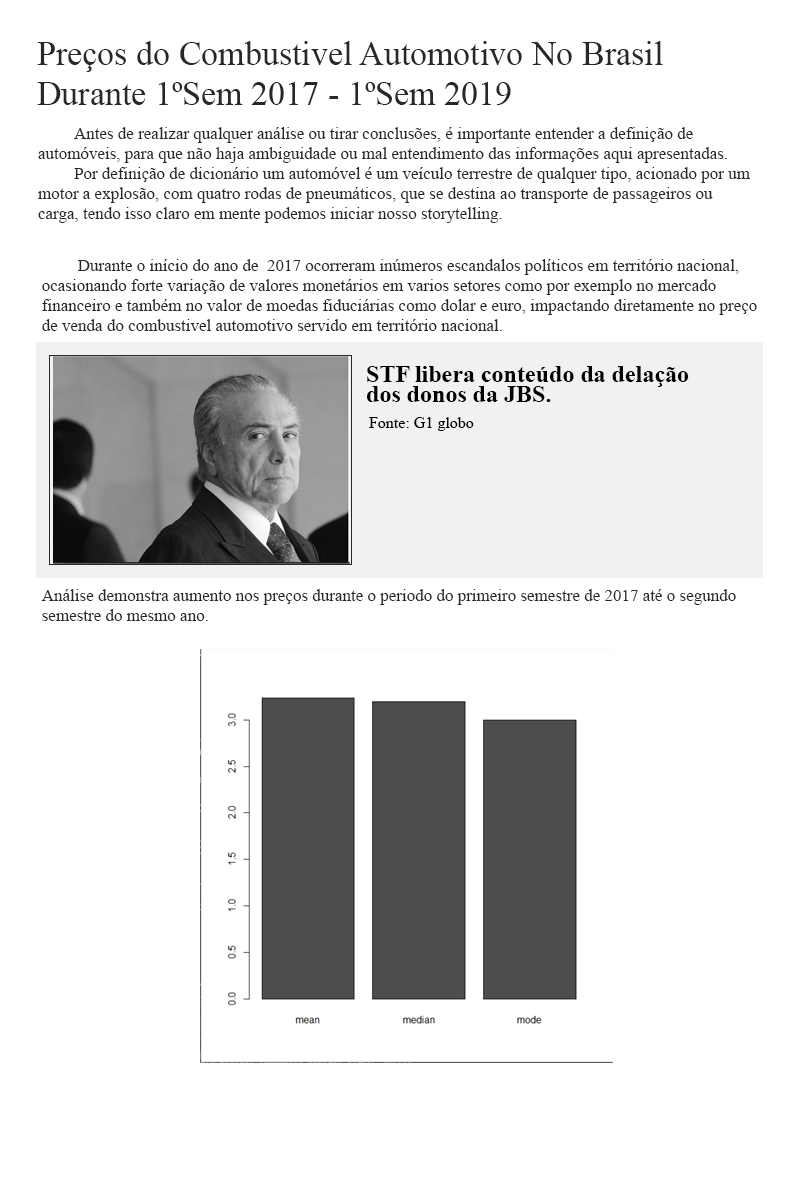
<style>
.page{position:relative;width:800px;height:1200px;background:#ffffff}
.page>*{position:absolute;margin:0}
.t1{font:34px/40px "TimesNewRomanPSMT";color:#282828}
.t2{font:17px/20px "TimesNewRomanPSMT";color:#282828}
.t3{font:24px/20px "TimesNewRomanPS-BoldMT";color:#000000}
.t4{font:16px "TimesNewRomanPSMT";color:#000000}
</style>
<div class="page">
<p class="t1" style="left:37px;top:41px;width:626px;height:64px">Preços do Combustivel Automotivo No Brasil<br>Durante 1ºSem 2017 - 1ºSem 2019</p>
<p class="t2" style="left:38px;top:127px;width:712px;height:96px;text-align:justify">Antes de realizar qualquer análise ou tirar conclusões, é importante entender a definição de <br>automóveis, para que não haja ambiguidade ou mal entendimento das informações aqui apresentadas.<br> Por definição de dicionário um automóvel é um veículo terrestre de qualquer tipo, acionado por um <br>motor a explosão, com quatro rodas de pneumáticos, que se destina ao transporte de passageiros ou <br>carga, tendo isso claro em mente podemos iniciar nosso storytelling.</p>
<p class="t2" style="left:42px;top:259px;width:715px;height:72px;text-align:justify">Durante o início do ano de  2017 ocorreram inúmeros escandalos políticos em território nacional, <br>ocasionando forte variação de valores monetários em varios setores como por exemplo no mercado <br>financeiro e também no valor de moedas fiduciárias como dolar e euro, impactando diretamente no preço<br>de venda do combustivel automotivo servido em território nacional.</p>
<p class="t3" style="left:367px;top:366px;width:322px;height:36px">STF libera conteúdo da delação <br>dos donos da JBS.</p>
<p class="t4" style="left:369px;top:417px;width:105px;height:14px">Fonte: G1 globo</p>
<p class="t2" style="left:41px;top:589px;width:695px;height:32px;text-align:justify">Análise demonstra aumento nos preços durante o periodo do primeiro semestre de 2017 até o segundo <br>semestre do mesmo ano.</p>
</div>
